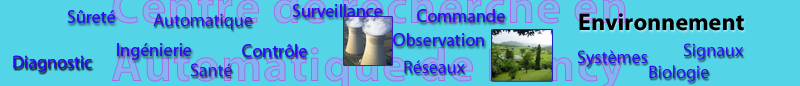
<style>
.page{position:relative;width:800px;height:86px;background:#53d4e7}
.page>*{position:absolute;margin:0}
.t1{font:18px "MyriadPro-Regular";color:#3009f6}
.t2{font:24px "MyriadPro-Bold";color:#000000}
</style>
<div class="page">
<p class="t1" style="left:292px;top:4px;width:90px;height:13px">Surveillance</p>
<p class="t1" style="left:67px;top:10px;width:48px;height:13px">Sûreté</p>
<p class="t1" style="left:153px;top:13px;width:99px;height:17px">Automatique</p>
<p class="t1" style="left:417px;top:9px;width:88px;height:13px">Commande</p>
<p class="t2" style="left:579px;top:13px;width:165px;height:18px">Environnement</p>
<p class="t1" style="left:393px;top:33px;width:91px;height:13px">Observation</p>
<p class="t1" style="left:117px;top:43px;width:74px;height:17px">Ingénierie</p>
<p class="t1" style="left:242px;top:44px;width:65px;height:13px">Contrôle</p>
<p class="t1" style="left:577px;top:50px;width:70px;height:17px">Systèmes</p>
<p class="t1" style="left:683px;top:43px;width:60px;height:17px">Signaux</p>
<p class="t1" style="left:13px;top:55px;width:79px;height:17px">Diagnostic</p>
<p class="t1" style="left:13px;top:55px;width:79px;height:17px">Diagnostic</p>
<p class="t1" style="left:190px;top:63px;width:42px;height:14px">Santé</p>
<p class="t1" style="left:404px;top:60px;width:61px;height:14px">Réseaux</p>
<p class="t1" style="left:649px;top:65px;width:60px;height:17px">Biologie</p>
</div>
